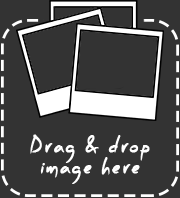
<style>
.page{position:relative;width:180px;height:198px;background:#333333}
.page>*{position:absolute;margin:0}
.t1{font:22px/21px "PFScandalPro-Black";letter-spacing:0.1em;color:#ffffff;font-weight:bold;scale:0.63 1}
</style>
<div class="page">
<p class="t1" style="left:30px;top:134px;width:120px;height:50px;text-align:center">Drag &amp; drop<br>image here</p>
</div>
